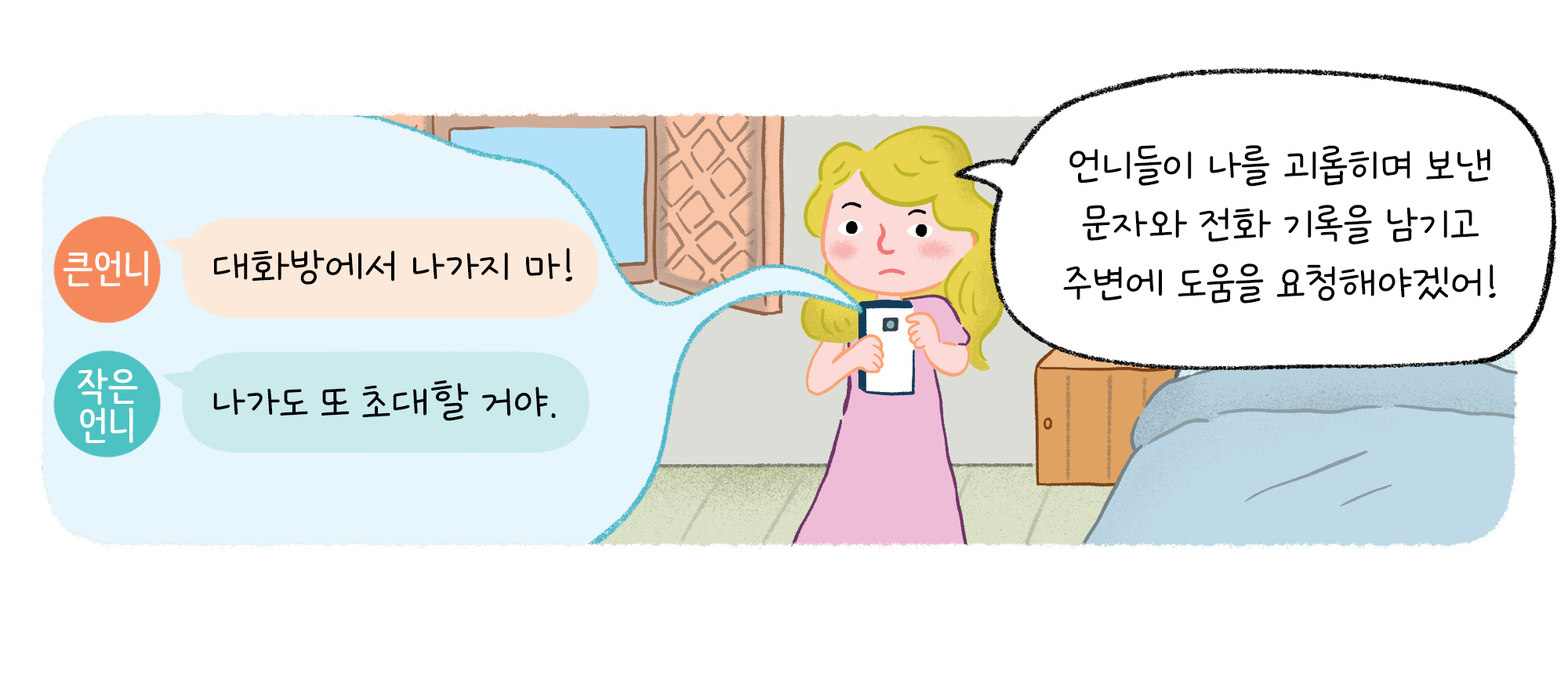
<style>
.page{position:relative;width:1568px;height:690px;background:#ffffff}
.page>*{position:absolute;margin:0}
.t1{font:55.5px/58.8px "GangwonEduSaeeumMedium";color:#000000}
.t2{font:39.2px "NanumBarunpen-Bold";color:#ffffff}
.t3{font:55.5px "GangwonEduSaeeumMedium";color:#000000}
.t4{font:39.2px/39.2px "NanumBarunpen-Bold";color:#ffffff}
</style>
<div class="page">
<p class="t1" style="left:1063px;top:145px;width:433px;height:158px;text-align:center">언니들이 나를 괴롭히며 보낸<br>문자와 전화 기록을 남기고<br>주변에 도움을 요청해야겠어!</p>
<p class="t2" style="left:63px;top:250px;width:85px;height:37px">큰언니</p>
<p class="t3" style="left:213px;top:248px;width:359px;height:37px">대화방에서 나가지 마!</p>
<p class="t4" style="left:78px;top:368px;width:60px;height:75px;text-align:center">작은<br>언니</p>
<p class="t3" style="left:213px;top:380px;width:343px;height:41px">나가도 또 초대할 거야.</p>
</div>
